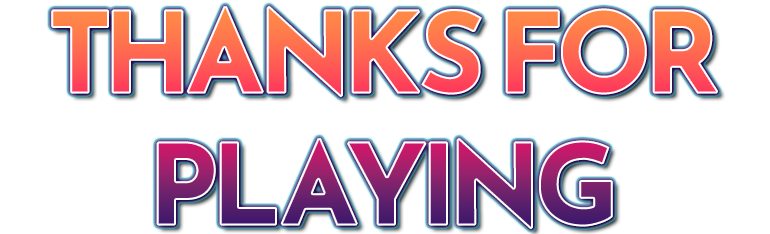
<style>
.page{position:relative;width:770px;height:234px;background:#ffffff}
.page>*{position:absolute;margin:0}
.t1{font:110px "ReemKufi-Bold";font-weight:bold}
</style>
<div class="page">
<p class="t1" style="left:51px;top:6px;width:667px;height:223px;text-align:center">THANKS FOR<br>PLAYING</p>
</div>
